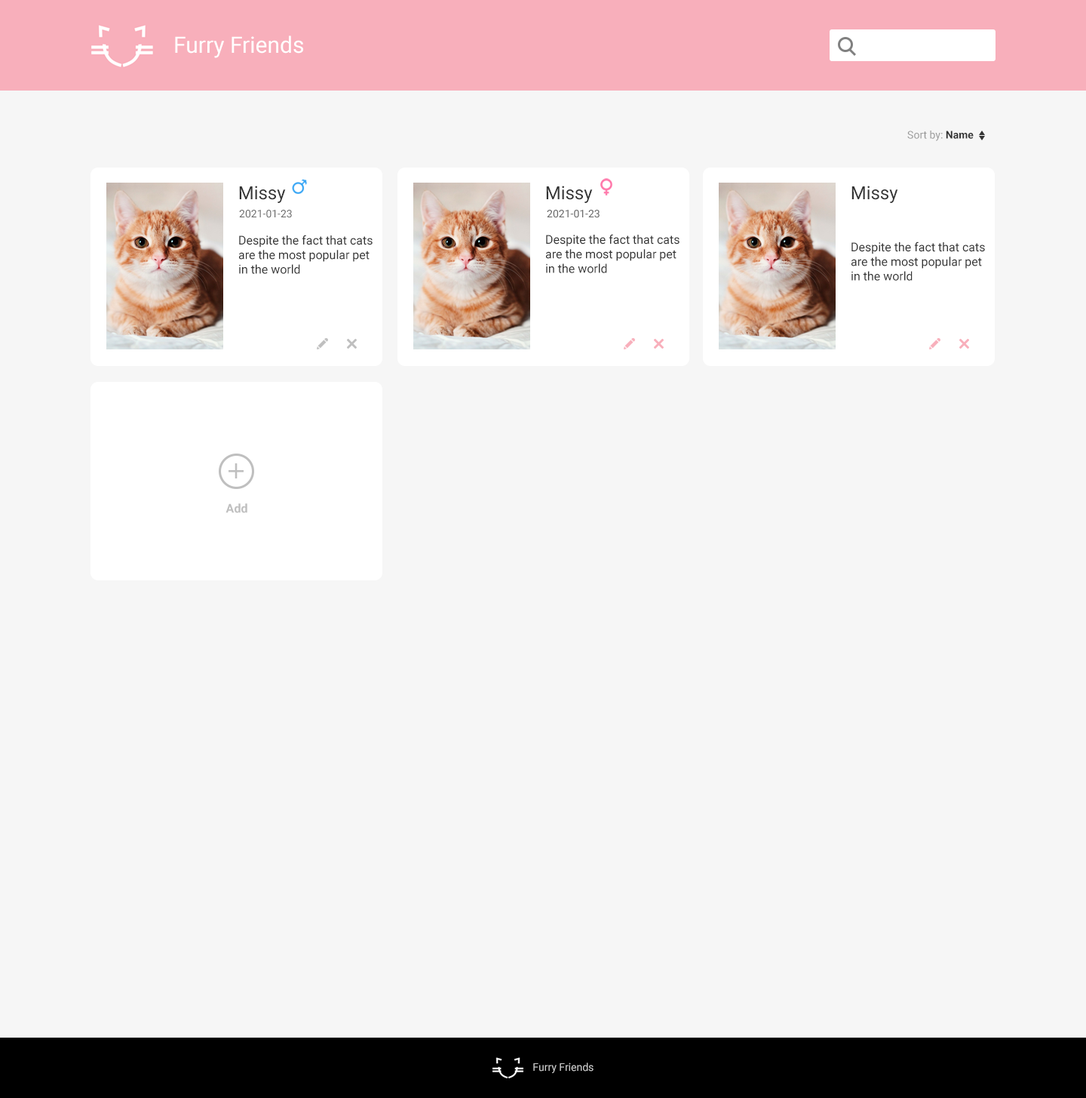
<style>
.page{position:relative;width:1086px;height:1098px;background:#f6f6f6}
.page>*{position:absolute;margin:0}
.t1{font:22.6px "Roboto-Regular";color:#ffffff}
.t2{font:10.6px "Roboto-Regular";color:#999999}
.t3{font:10.6px "Roboto-Bold";color:#333333}
.t4{font:18.1px "Roboto-Regular";color:#333333}
.t5{font:10.6px "Roboto-Regular";color:#666666}
.t6{font:12.1px "Roboto-Regular";color:#333333}
.t7{font:12.1px "Roboto-Bold";color:#bfbfbf}
.t8{font:10.6px "Roboto-Regular";color:#cccccc}
</style>
<div class="page">
<p class="t1" style="left:175px;top:35px;width:128px;height:23px">Furry Friends</p>
<p class="t2" style="left:908px;top:131px;width:66px;height:10px">Sort by: <span class="t3">Name</span></p>
<p class="t4" style="left:239px;top:186px;width:47px;height:17px">Missy</p>
<p class="t4" style="left:546px;top:186px;width:47px;height:17px">Missy</p>
<p class="t4" style="left:852px;top:186px;width:46px;height:17px">Missy</p>
<p class="t5" style="left:239px;top:210px;width:53px;height:8px">2021-01-23</p>
<p class="t6" style="left:545px;top:234px;width:135px;height:39px">Despite the fact that cats are the most popular pet in the world</p>
<p class="t6" style="left:238px;top:235px;width:135px;height:39px">Despite the fact that cats are the most popular pet in the world</p>
<p class="t6" style="left:851px;top:241px;width:134px;height:40px">Despite the fact that cats are the most popular pet in the world</p>
<p class="t7" style="left:226px;top:503px;width:21px;height:10px">Add</p>
<p class="t8" style="left:533px;top:1062px;width:61px;height:11px">Furry Friends</p>
</div>
